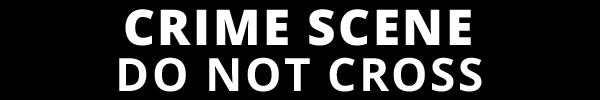
<style>
.page{position:relative;width:600px;height:100px;background:#000000}
.page>*{position:absolute;margin:0}
.t1{font:49.2px "OpenSans-Extrabold";letter-spacing:0.05em;color:#ffffff}
.t2{font:46px "OpenSans-Bold";letter-spacing:0.05em;color:#ffffff}
</style>
<div class="page">
<p class="t1" style="left:125px;top:9px;width:346px;height:37px">CRIME SCENE</p>
<p class="t2" style="left:119px;top:57px;width:363px;height:35px">DO NOT CROSS</p>
</div>
